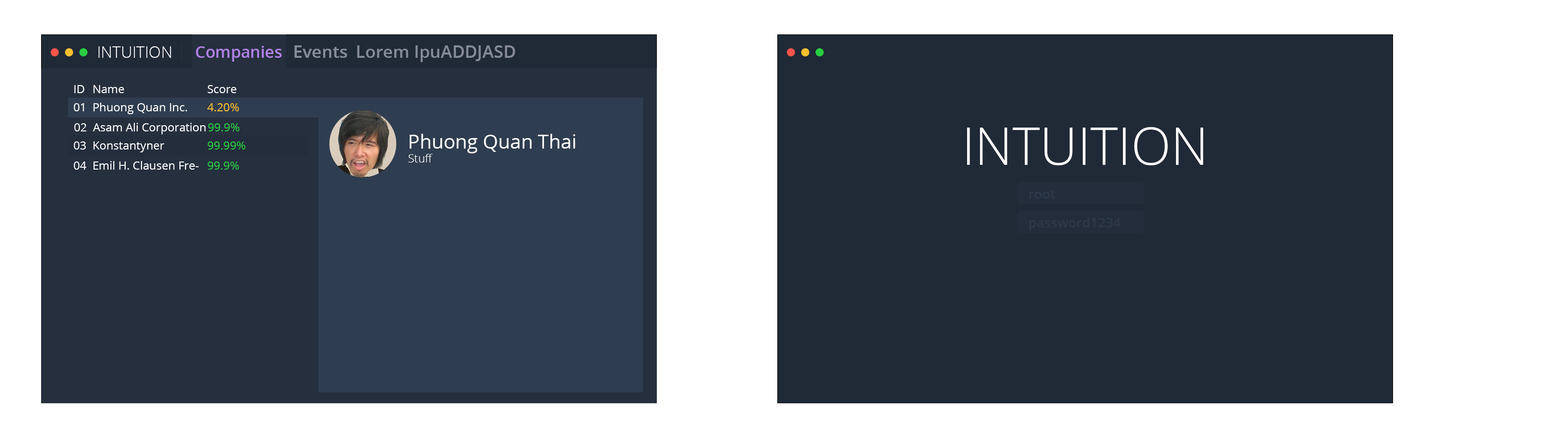
<style>
.page{position:relative;width:1568px;height:430px;background:#ffffff}
.page>*{position:absolute;margin:0}
.t1{font:16px "OpenSans-Light";color:#ffffff}
.t2{font:16.2px "OpenSans-Semibold";color:#b182e9}
.t3{font:17.2px "OpenSans-Semibold";color:#858c97}
.t4{font:11.5px "OpenSans";color:#ffffff}
.t5{font:11.5px "OpenSans";color:#ffc02e}
.t6{font:11.5px "OpenSans";color:#2ace42}
.t7{font:19.5px "OpenSans";color:#ffffff}
.t8{font:52.2px "OpenSans-Light";color:#ffffff}
.t9{font:11.7px "OpenSans-Light";color:#ffffff}
.t10{font:13.3px "OpenSans-Semibold";color:#2d394a}
</style>
<div class="page">
<p class="t1" style="left:98px;top:46px;width:73px;height:12px">INTUITION</p>
<p class="t2" style="left:196px;top:46px;width:86px;height:16px">Companies</p>
<p class="t3" style="left:294px;top:45px;width:53px;height:13px">Events</p>
<p class="t3" style="left:294px;top:45px;width:53px;height:13px">Events</p>
<p class="t3" style="left:357px;top:45px;width:158px;height:17px">Lorem IpuADDJASD</p>
<p class="t4" style="left:74px;top:85px;width:11px;height:8px">ID</p>
<p class="t4" style="left:93px;top:85px;width:31px;height:8px">Name</p>
<p class="t4" style="left:207px;top:85px;width:30px;height:8px">Score</p>
<p class="t4" style="left:74px;top:103px;width:10px;height:8px">01</p>
<p class="t4" style="left:93px;top:103px;width:94px;height:11px">Phuong Quan Inc.</p>
<p class="t5" style="left:207px;top:103px;width:32px;height:8px">4.20%</p>
<p class="t4" style="left:74px;top:123px;width:13px;height:8px">02</p>
<p class="t4" style="left:93px;top:123px;width:113px;height:11px">Asam Ali Corporation</p>
<p class="t6" style="left:208px;top:123px;width:32px;height:8px">99.9%</p>
<p class="t7" style="left:410px;top:134px;width:166px;height:19px">Phuong Quan Thai</p>
<p class="t8" style="left:967px;top:127px;width:236px;height:38px">INTUITION</p>
<p class="t4" style="left:74px;top:142px;width:12px;height:8px">03</p>
<p class="t4" style="left:93px;top:142px;width:71px;height:10px">Konstantyner</p>
<p class="t6" style="left:207px;top:142px;width:39px;height:8px">99.99%</p>
<p class="t4" style="left:74px;top:162px;width:13px;height:8px">04</p>
<p class="t4" style="left:93px;top:161px;width:106px;height:9px">Emil H. Clausen Fre-</p>
<p class="t6" style="left:207px;top:162px;width:32px;height:8px">99.9%</p>
<p class="t9" style="left:408px;top:154px;width:25px;height:9px">Stuff</p>
<p class="t10" style="left:1029px;top:190px;width:27px;height:9px">root</p>
<p class="t10" style="left:1029px;top:218px;width:92px;height:13px">password1234</p>
</div>
